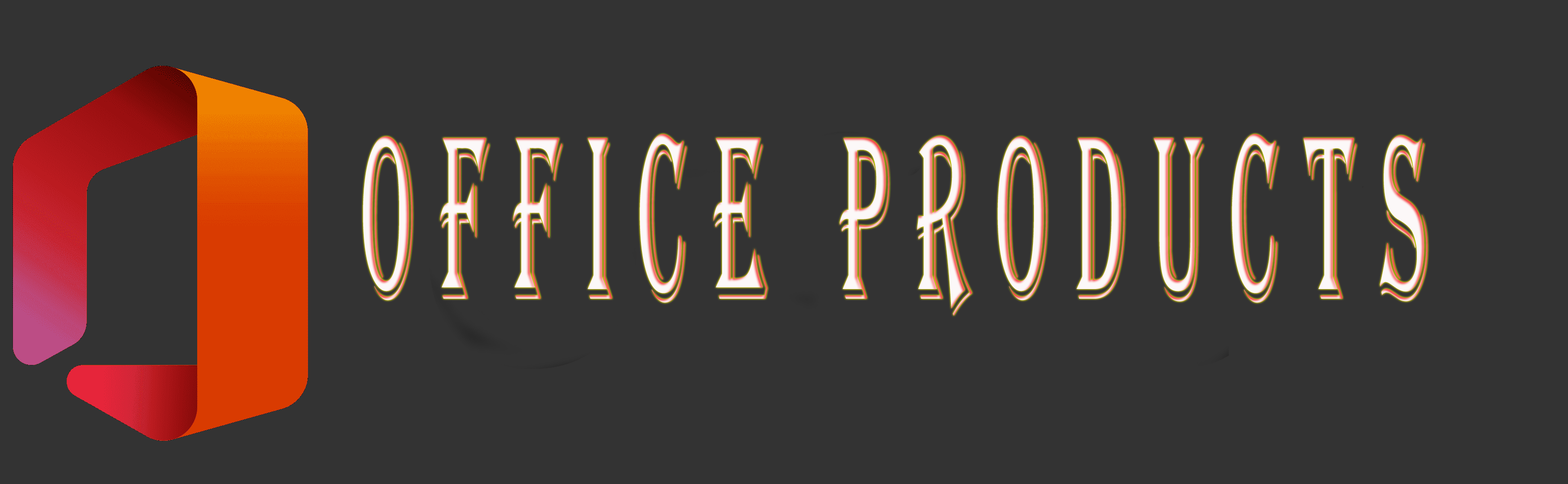
<style>
.page{position:relative;width:1568px;height:484px;background:#333333}
.page>*{position:absolute;margin:0}
.t1{font:240.8px "Algerian";letter-spacing:0.3em;text-transform:uppercase;scale:0.36 1}
</style>
<div class="page">
<p class="t1" style="left:363px;top:134px;width:1065px;height:182px">OFFICE PRODUCTS</p>
</div>
